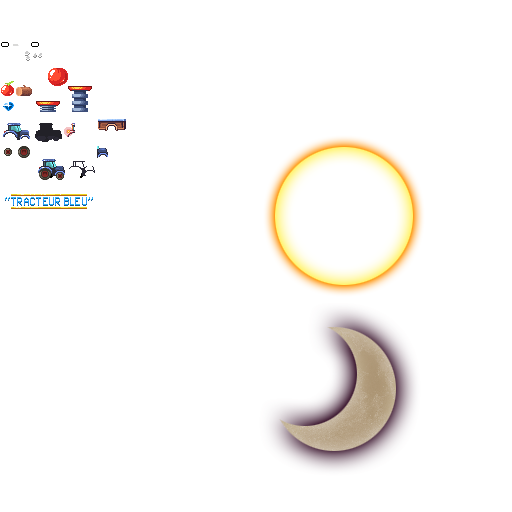
<style>
.page{position:relative;width:512px;height:512px;background:#ffffff}
.page>*{position:absolute;margin:0}
.t1{font:16px "Pixel-UniCode";letter-spacing:0.02em}
</style>
<div class="page">
<p class="t1" style="left:5px;top:197px;width:88px;height:8px">“TRACTEUR BLEU”</p>
</div>
